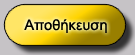
<style>
.page{position:relative;width:135px;height:55px}
.page>*{position:absolute;margin:0}
.t1{font:14.7px "ArialMT";color:#000000}
</style>
<div class="page">
<p class="t1" style="left:24px;top:19px;width:83px;height:14px">Αποθήκευση</p>
</div>
